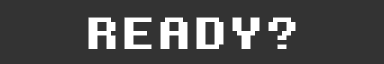
<style>
.page{position:relative;width:384px;height:64px;background:#333333}
.page>*{position:absolute;margin:0}
.t1{font:72px "8-Bit-Madness";color:#ffffff}
</style>
<div class="page">
<p class="t1" style="left:88px;top:17px;width:208px;height:32px">READY?</p>
</div>
